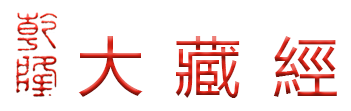
<style>
.page{position:relative;width:351px;height:111px;background:#ffffff}
.page>*{position:absolute;margin:0}
.t1{font:65px "MicrosoftYaHei";letter-spacing:0.5em}
</style>
<div class="page">
<p class="t1" style="left:78px;top:36px;width:259px;height:62px">大藏經</p>
</div>
